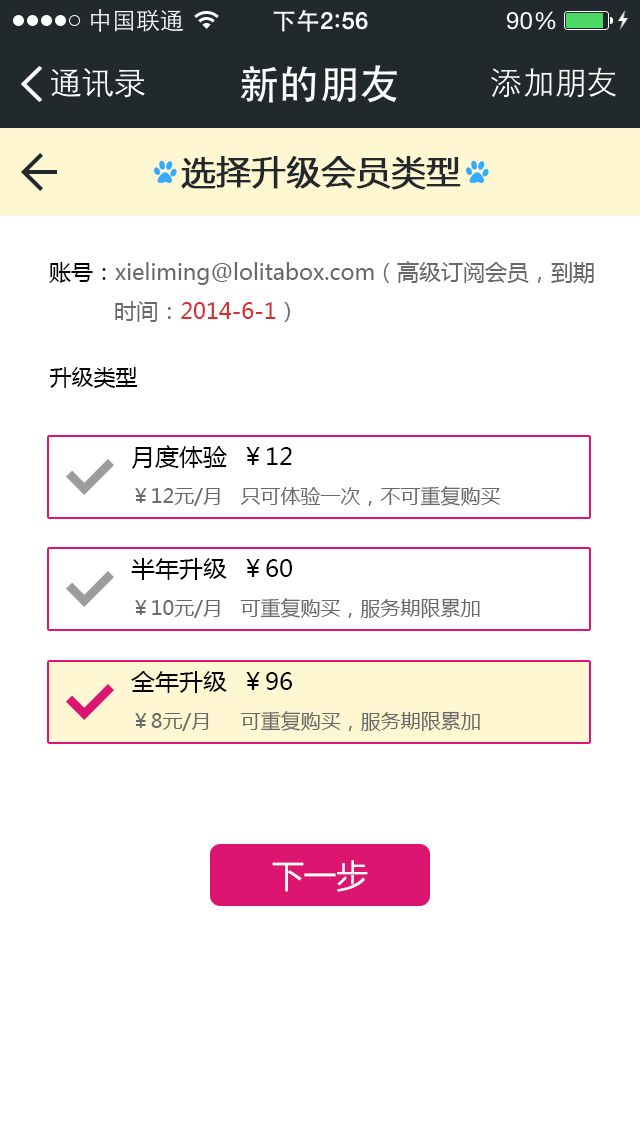
<style>
.page{position:relative;width:640px;height:1136px;background:#ffffff}
.page>*{position:absolute;margin:0}
.t1{font:34px "MicrosoftYaHei";color:#22292c;font-weight:bold}
.t2{font:22px "MicrosoftYaHei";color:#696969}
.t3{font:22px "MicrosoftYaHei";color:#000000}
.t4{font:22px "MicrosoftYaHei";color:#d53030}
.t5{font:20px "MicrosoftYaHei";color:#696969}
.t6{font:24px "MicrosoftYaHei";color:#000000}
.t7{font:32.4px "MicrosoftYaHei";color:#ffffff}
</style>
<div class="page">
<p class="t1" style="left:181px;top:156px;width:280px;height:34px">选择升级会员类型</p>
<p class="t2" style="left:49px;top:261px;width:545px;height:61px"><span class="t3">账号：</span>xieliming@lolitabox.com（高级订阅会员，到期<br>          时间：<span class="t4">2014-6-1</span>）</p>
<p class="t3" style="left:49px;top:367px;width:89px;height:21px">升级类型</p>
<p class="t5" style="left:132px;top:445px;width:369px;height:61px"><span class="t6">月度体验  ￥12<br></span>￥12元/月   只可体验一次，不可重复购买</p>
<p class="t5" style="left:131px;top:558px;width:349px;height:60px"><span class="t6">半年升级  ￥60<br></span>￥10元/月   可重复购买，服务期限累加</p>
<p class="t5" style="left:131px;top:671px;width:349px;height:60px"><span class="t6">全年升级  ￥96<br></span>￥8元/月     可重复购买，服务期限累加</p>
<p class="t7" style="left:272px;top:860px;width:96px;height:32px">下一步</p>
</div>
